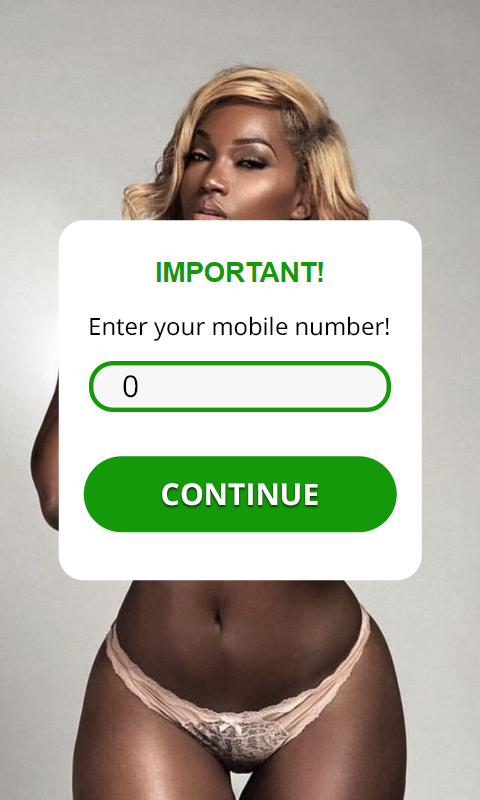
<style>
.page{position:relative;width:480px;height:800px;background:#ffffff}
.page>*{position:absolute;margin:0}
.t1{font:24px "OpenSans-Regular";color:#000000}
.t2{font:30px "OpenSans-Regular";color:#000000}
.t3{font:30px "OpenSans-Bold";color:#ffffff}
</style>
<div class="page">
<p class="t1" style="left:90px;top:316px;width:299px;height:25px">Enter your mobile number!</p>
<p class="t2" style="left:123px;top:375px;width:15px;height:23px">0</p>
<p class="t3" style="left:162px;top:483px;width:156px;height:23px">CONTINUE</p>
</div>
